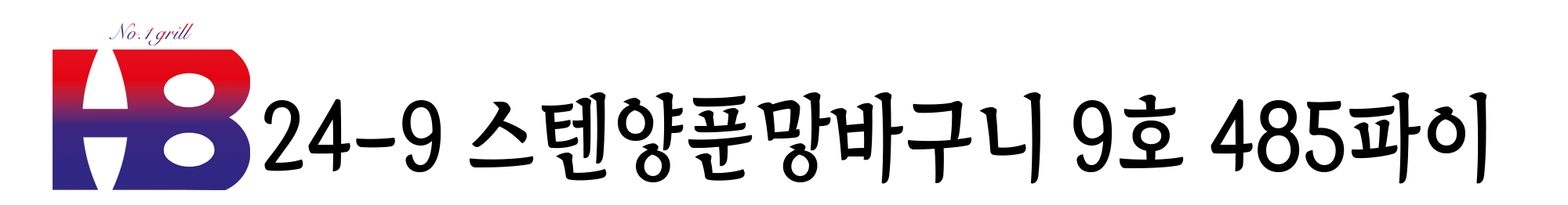
<style>
.page{position:relative;width:1568px;height:205px;background:#ffffff}
.page>*{position:absolute;margin:0}
.t1{font:93.7px "TheIndependenceHallofKorea-Regular";color:#000000;scale:0.89 1}
</style>
<div class="page">
<p class="t1" style="left:264px;top:93px;width:1223px;height:91px">24-9 스텐양푼망바구니 9호 485파이</p>
</div>
